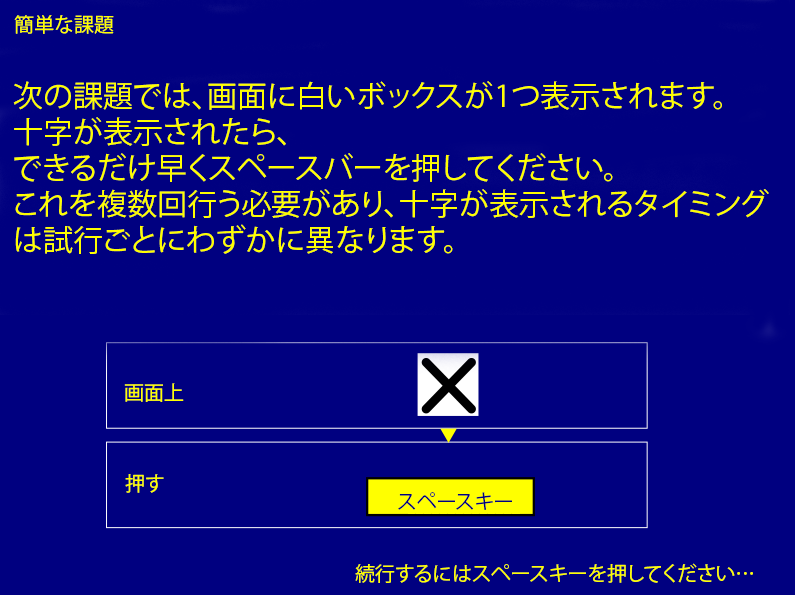
<style>
.page{position:relative;width:795px;height:595px;background:#000080}
.page>*{position:absolute;margin:0}
.t1{font:20px "KozGoPr6N-Regular";color:#ffff00}
.t2{font:30px "KozGoPr6N-Regular";color:#ffff00}
.t3{font:20px "KozGoPr6N-Regular";color:#000080}
</style>
<div class="page">
<p class="t1" style="left:14px;top:15px;width:100px;height:19px">簡単な課題</p>
<p class="t2" style="left:13px;top:81px;width:756px;height:173px">次の課題では、画面に白いボックスが1つ表示されます。<br>十字が表示されたら、<br>できるだけ早くスペースバーを押してください。<br>これを複数回行う必要があり、十字が表示されるタイミング<br>は試行ごとにわずかに異なります。</p>
<p class="t1" style="left:124px;top:383px;width:60px;height:19px">画面上</p>
<p class="t3" style="left:398px;top:492px;width:114px;height:18px">スペースキー</p>
<p class="t1" style="left:355px;top:563px;width:398px;height:20px">続行するにはスペースキーを押してください…</p>
</div>
